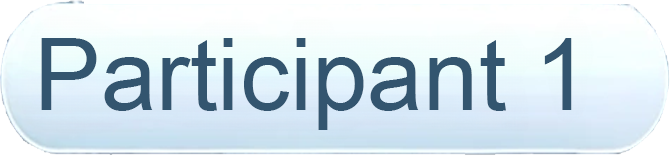
<style>
.page{position:relative;width:670px;height:156px}
.page>*{position:absolute;margin:0}
.t1{font:100px "ArialMT";color:#33556f}
</style>
<div class="page">
<p class="t1" style="left:41px;top:38px;width:531px;height:92px">Participant 1</p>
</div>
